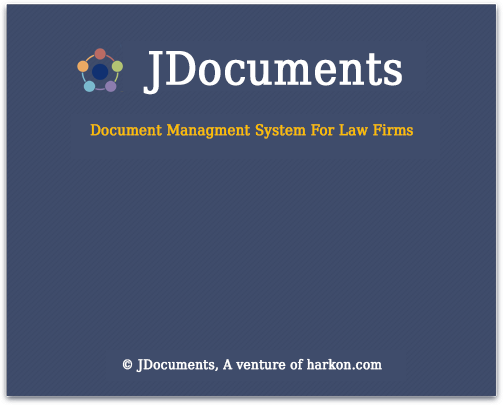
<style>
.page{position:relative;width:503px;height:405px;background:#3f4c6b}
.page>*{position:absolute;margin:0}
.t1{font:45.3px "DejaVuSerifCondensed";color:#ffffff;font-weight:bold}
.t2{font:14.7px "DejaVuSerifCondensed";color:#febf01;font-weight:bold}
.t3{font:13.3px "DejaVuSerifCondensed";color:#ffffff;font-weight:bold}
</style>
<div class="page">
<p class="t1" style="left:143px;top:51px;width:259px;height:44px">JDocuments</p>
<p class="t2" style="left:90px;top:123px;width:323px;height:16px">Document Managment System For Law Firms</p>
<p class="t3" style="left:122px;top:358px;width:260px;height:15px">© JDocuments, A venture of harkon.com</p>
</div>
